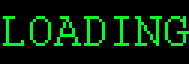
<style>
.page{position:relative;width:189px;height:64px;background:#000000}
.page>*{position:absolute;margin:0}
.t1{font:48px "Courier";color:#00ff24}
</style>
<div class="page">
<p class="t1" style="left:3px;top:16px;width:186px;height:30px">LOADING</p>
</div>
